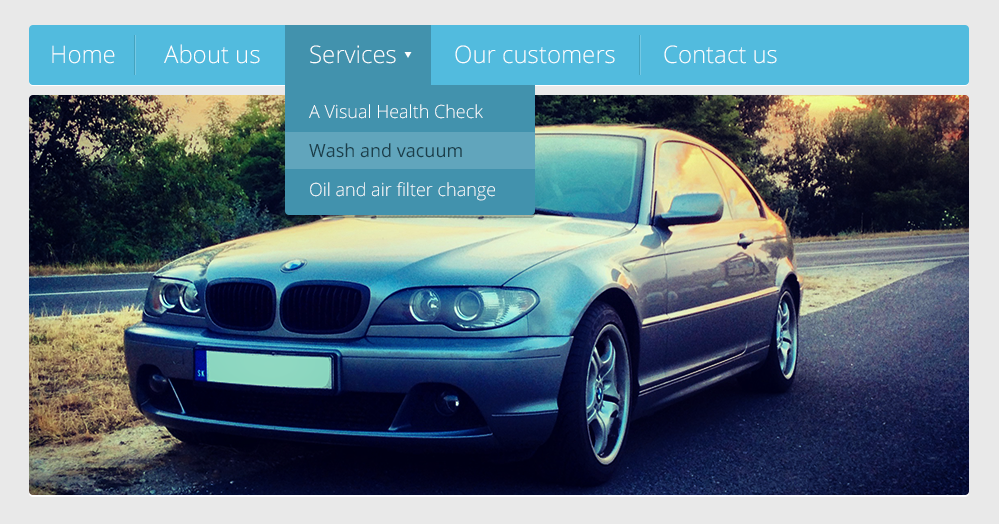
<style>
.page{position:relative;width:999px;height:524px}
.page>*{position:absolute;margin:0}
.t1{font:24.2px "OpenSans-Light";color:#ffffff}
.t2{font:18.2px "OpenSans-Light";color:#ffffff}
.t3{font:18.2px "OpenSans";color:#1b3e4a}
</style>
<div class="page">
<p class="t1" style="left:52px;top:45px;width:63px;height:19px">Home</p>
<p class="t1" style="left:164px;top:44px;width:96px;height:20px">About us</p>
<p class="t1" style="left:310px;top:45px;width:86px;height:19px">Services</p>
<p class="t1" style="left:455px;top:45px;width:160px;height:19px">Our customers</p>
<p class="t1" style="left:664px;top:45px;width:113px;height:19px">Contact us</p>
<p class="t2" style="left:309px;top:104px;width:174px;height:15px">A Visual Health Check</p>
<p class="t3" style="left:309px;top:143px;width:153px;height:15px">Wash and vacuum</p>
<p class="t2" style="left:310px;top:182px;width:185px;height:19px">Oil and air filter change</p>
</div>
